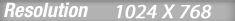
<style>
.page{position:relative;width:235px;height:21px;background:#b2b2b2}
.page>*{position:absolute;margin:0}
.t1{font:20px "HelveticaNeueLTPro-BdCnO";color:#ffffff}
.t2{font:20px "MyriadPro-Regular";color:#ffffff;font-weight:bold;font-style:italic}
</style>
<div class="page">
<p class="t1" style="left:4px;top:2px;width:84px;height:16px">Resolution</p>
<p class="t2" style="left:117px;top:4px;width:95px;height:15px">1024 X 768</p>
</div>
